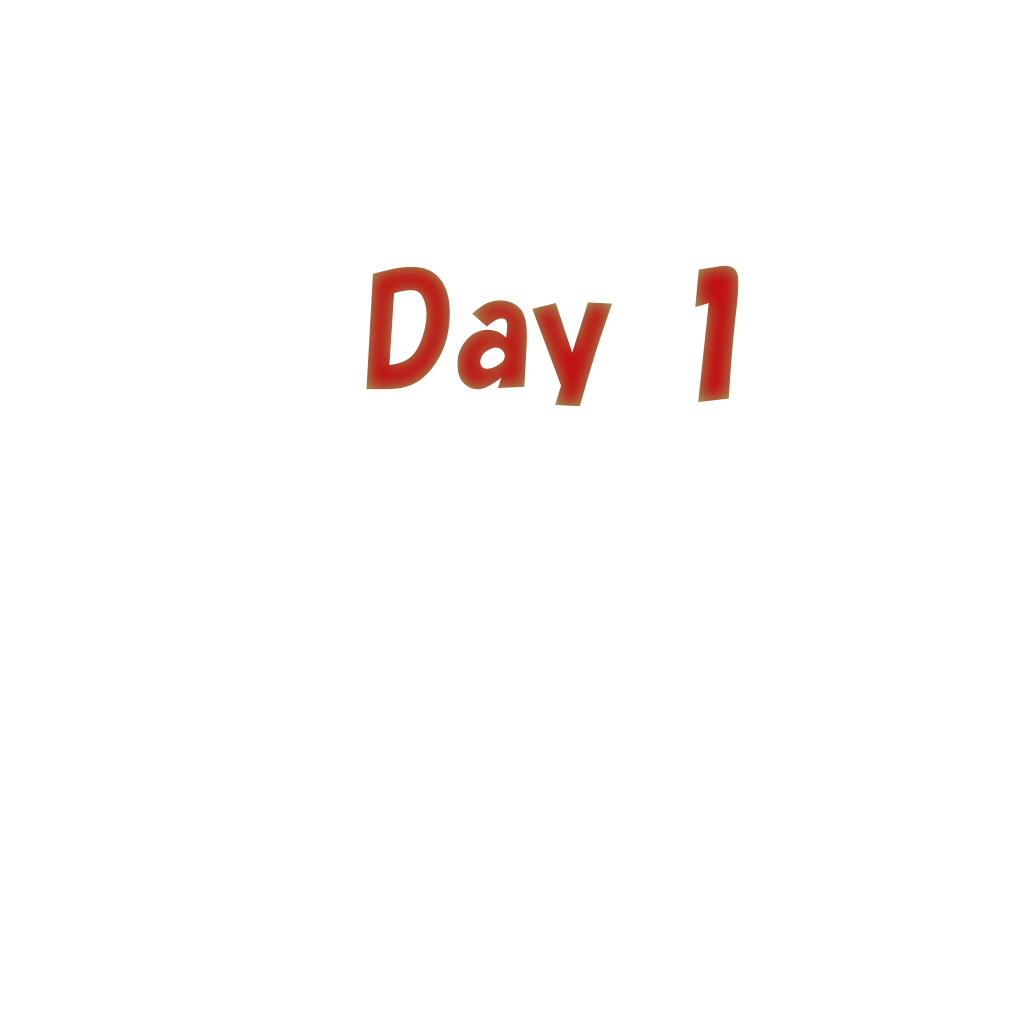
<style>
.page{position:relative;width:1024px;height:1024px;background:#ffffff}
.page>*{position:absolute;margin:0}
.t1{font:150px "HGSSoeiKakupoptai"}
</style>
<div class="page">
<p class="t1" style="left:366px;top:265px;width:373px;height:142px">Day 1</p>
</div>
